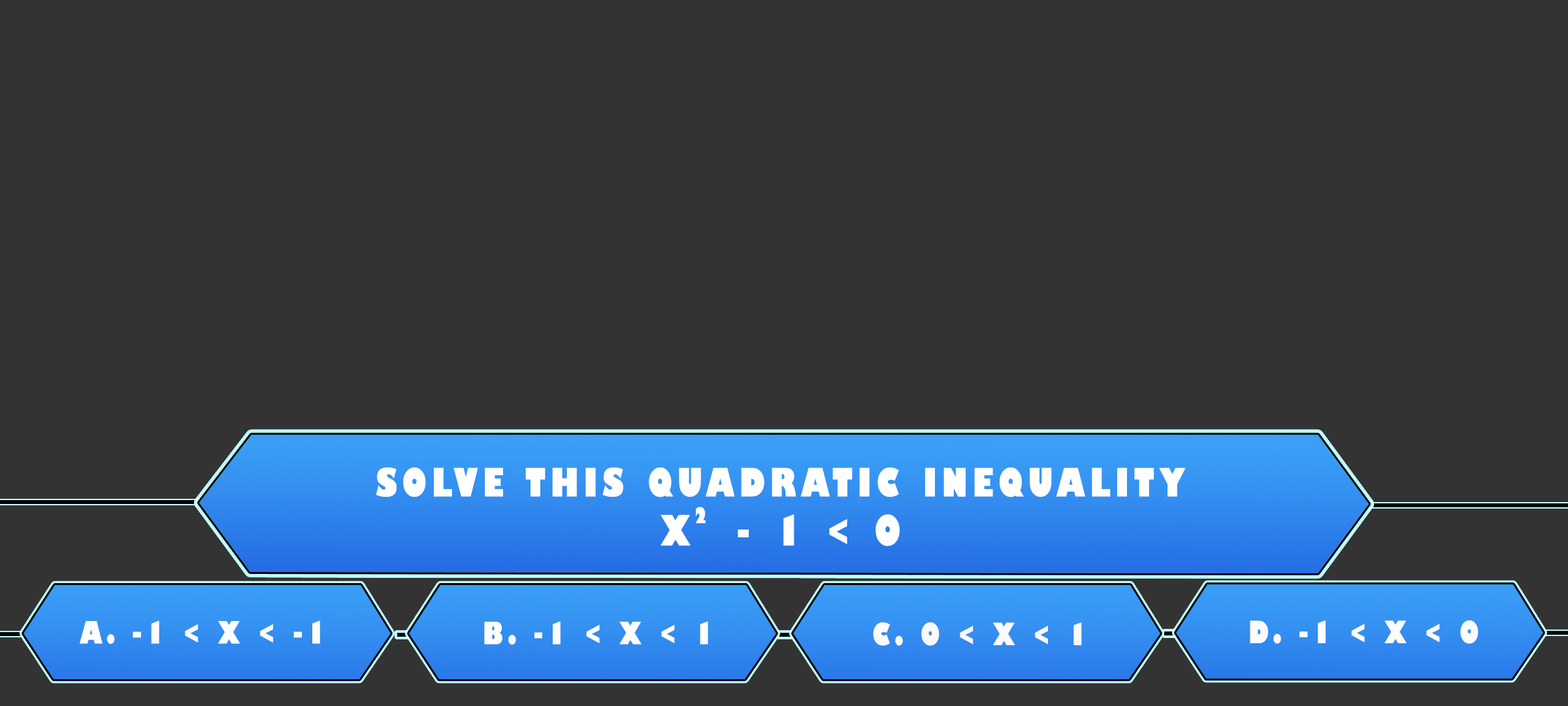
<style>
.page{position:relative;width:1568px;height:706px;background:#333333}
.page>*{position:absolute;margin:0}
.t1{font:38.1px/49px "GillSans-UltraBoldCondensed";letter-spacing:0.115em;color:#ffffff;text-transform:uppercase;scale:1.12 1}
.t2{font:40.8px/49px "GillSans-UltraBoldCondensed";letter-spacing:0.115em;color:#ffffff;text-transform:uppercase;scale:1.12 1}
.t3{font:21.1px "GillSans-UltraBoldCondensed";letter-spacing:0.115em;color:#ffffff;text-transform:uppercase;scale:1.11 1}
.t4{font:29.9px "GillSans-UltraBoldCondensed";letter-spacing:0.115em;color:#fefdfd;text-transform:uppercase;scale:1.12 1}
.t5{font:29.9px "GillSans-UltraBoldCondensed";letter-spacing:0.115em;color:#fcfafa;text-transform:uppercase;scale:1.12 1}
.t6{font:29.9px "GillSans-UltraBoldCondensed";letter-spacing:0.115em;color:#fdfcfc;text-transform:uppercase;scale:1.12 1}
</style>
<div class="page">
<p class="t1" style="left:376px;top:467px;width:810px;height:79px;text-align:center">solve this quadratic inequality<br><span class="t2">x  - 1 &lt; 0</span></p>
<p class="t3" style="left:695px;top:506px;width:11px;height:17px">2</p>
<p class="t4" style="left:80px;top:620px;width:240px;height:24px">a. -1 &lt; x &lt; -1</p>
<p class="t4" style="left:484px;top:621px;width:224px;height:23px">b. -1 &lt; x &lt; 1</p>
<p class="t5" style="left:873px;top:622px;width:209px;height:23px">c. 0 &lt; x &lt; 1</p>
<p class="t6" style="left:1250px;top:620px;width:228px;height:24px">d. -1 &lt; x &lt; 0</p>
</div>
